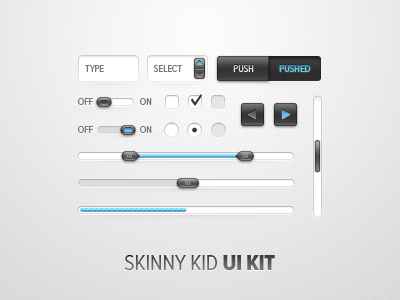
<style>
.page{position:relative;width:400px;height:300px}
.page>*{position:absolute;margin:0}
.t1{font:10px "ProximaNovaCond-Regular";color:#797979;text-transform:uppercase}
.t2{font:10px "ProximaNovaCond-Regular";color:#787878;text-transform:uppercase}
.t3{font:10px "ProximaNovaCond-Regular";text-transform:uppercase}
.t4{font:22px "ProximaNovaCond-Regular";letter-spacing:-0.01em;color:#575757;text-transform:uppercase}
.t5{font:22px "ProximaNovaCond-Extrabld";letter-spacing:-0.01em;color:#575757;text-transform:uppercase}
</style>
<div class="page">
<p class="t1" style="left:85px;top:65px;width:19px;height:7px">type</p>
<p class="t2" style="left:154px;top:65px;width:28px;height:7px">select</p>
<p class="t3" style="left:233px;top:65px;width:21px;height:7px">push</p>
<p class="t3" style="left:279px;top:65px;width:32px;height:7px">pushed</p>
<p class="t2" style="left:78px;top:98px;width:15px;height:7px">off</p>
<p class="t2" style="left:140px;top:98px;width:12px;height:7px">on</p>
<p class="t2" style="left:78px;top:126px;width:15px;height:7px">off</p>
<p class="t2" style="left:140px;top:126px;width:12px;height:7px">on</p>
<p class="t4" style="left:124px;top:255px;width:151px;height:16px">skinny kid <span class="t5">ui kit</span></p>
</div>
